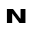
<style>
.page{position:relative;width:32px;height:32px;background:#ffffff}
.page>*{position:absolute;margin:0}
.t1{font:19.8px "Horizon-Bold";color:#000000;scale:0.91 1}
</style>
<div class="page">
<p class="t1" style="left:6px;top:9px;width:20px;height:14px">N</p>
</div>
